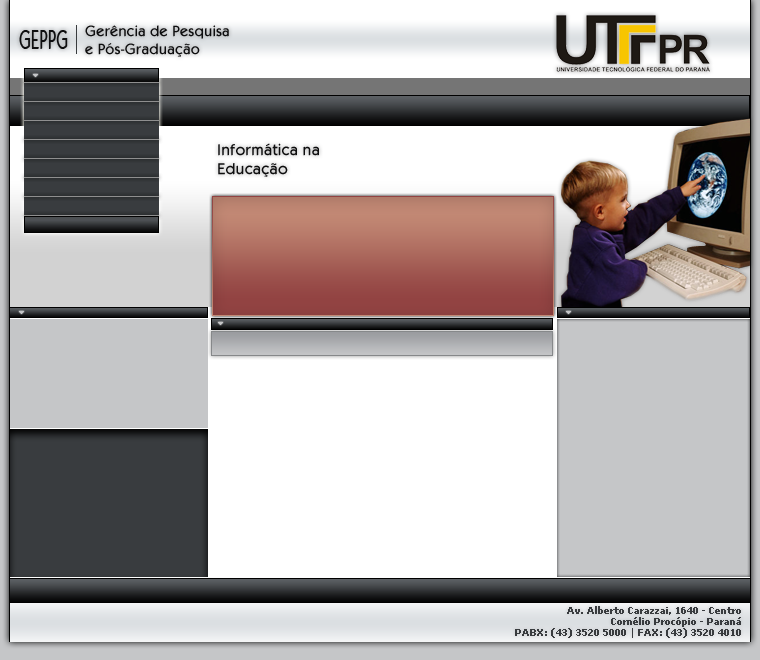
<style>
.page{position:relative;width:760px;height:660px;background:#ffffff}
.page>*{position:absolute;margin:0}
.t1{font:27.5px "KabobRegular";color:#0e0e0f;scale:0.58 1}
.t2{font:15px "KabobRegular";color:#0e0e0f}
.t3{font:16px "KabobRegular";color:#0e0e0f}
.t4{font:9px "Verdana-Bold";color:#393c3f}
</style>
<div class="page">
<p class="t1" style="left:19px;top:30px;width:49px;height:19px">GEPPG</p>
<p class="t2" style="left:85px;top:25px;width:144px;height:32px">Gerência de Pesquisa <br>e Pós-Graduação</p>
<p class="t3" style="left:218px;top:143px;width:101px;height:34px">Informática na<br>Educação</p>
<p class="t4" style="left:515px;top:606px;width:226px;height:32px;text-align:right">Av. Alberto Carazzai, 1640 - Centro<br>Cornélio Procópio - Paraná<br>PABX: (43) 3520 5000 | FAX: (43) 3520 4010</p>
</div>
